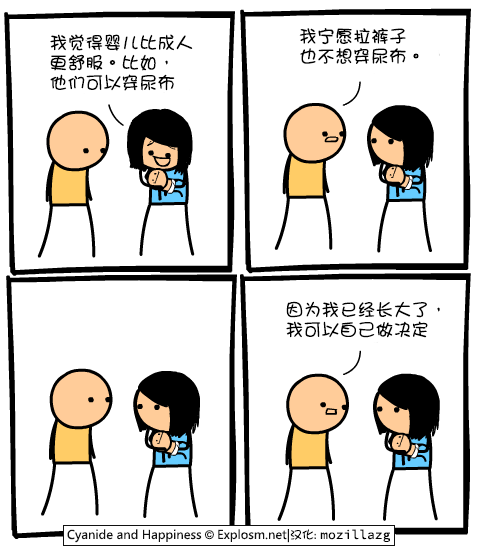
<style>
.page{position:relative;width:480px;height:560px;background:#ffffff}
.page>*{position:absolute;margin:0}
.t1{font:18px/20px "DFGirl";color:#000000}
</style>
<div class="page">
<p class="t1" style="left:299px;top:28px;width:120px;height:36px">我宁愿拉裤子<br>也不想穿尿布。</p>
<p class="t1" style="left:50px;top:34px;width:143px;height:57px">我觉得婴儿比成人<br>更舒服。比如，<br>他们可以穿尿布</p>
<p class="t1" style="left:286px;top:301px;width:154px;height:37px">因为我已经长大了，<br>我可以自己做决定</p>
</div>
